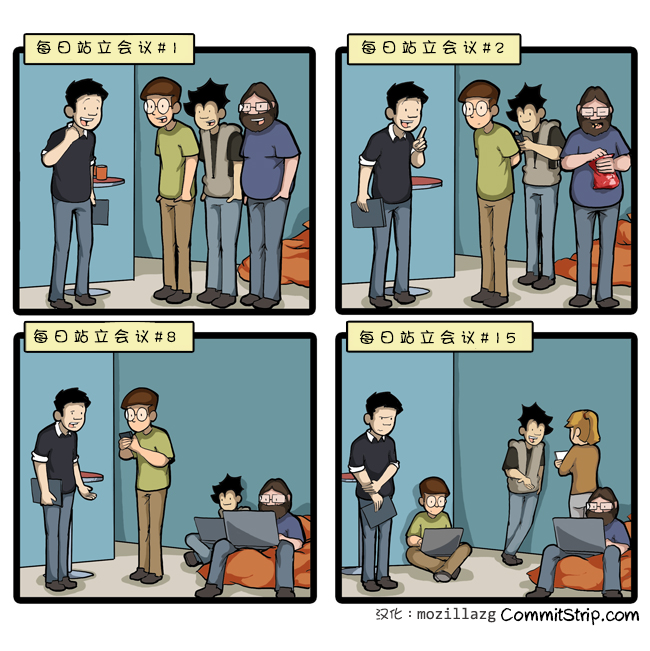
<style>
.page{position:relative;width:650px;height:651px}
.page>*{position:absolute;margin:0}
.t1{font:16px "DFGirl";letter-spacing:0.26em;color:#000000}
</style>
<div class="page">
<p class="t1" style="left:36px;top:39px;width:140px;height:15px">每日站立会议#1</p>
<p class="t1" style="left:361px;top:39px;width:143px;height:15px">每日站立会议#2</p>
<p class="t1" style="left:33px;top:328px;width:143px;height:15px">每日站立会议#8</p>
<p class="t1" style="left:359px;top:329px;width:156px;height:15px">每日站立会议#15</p>
</div>
